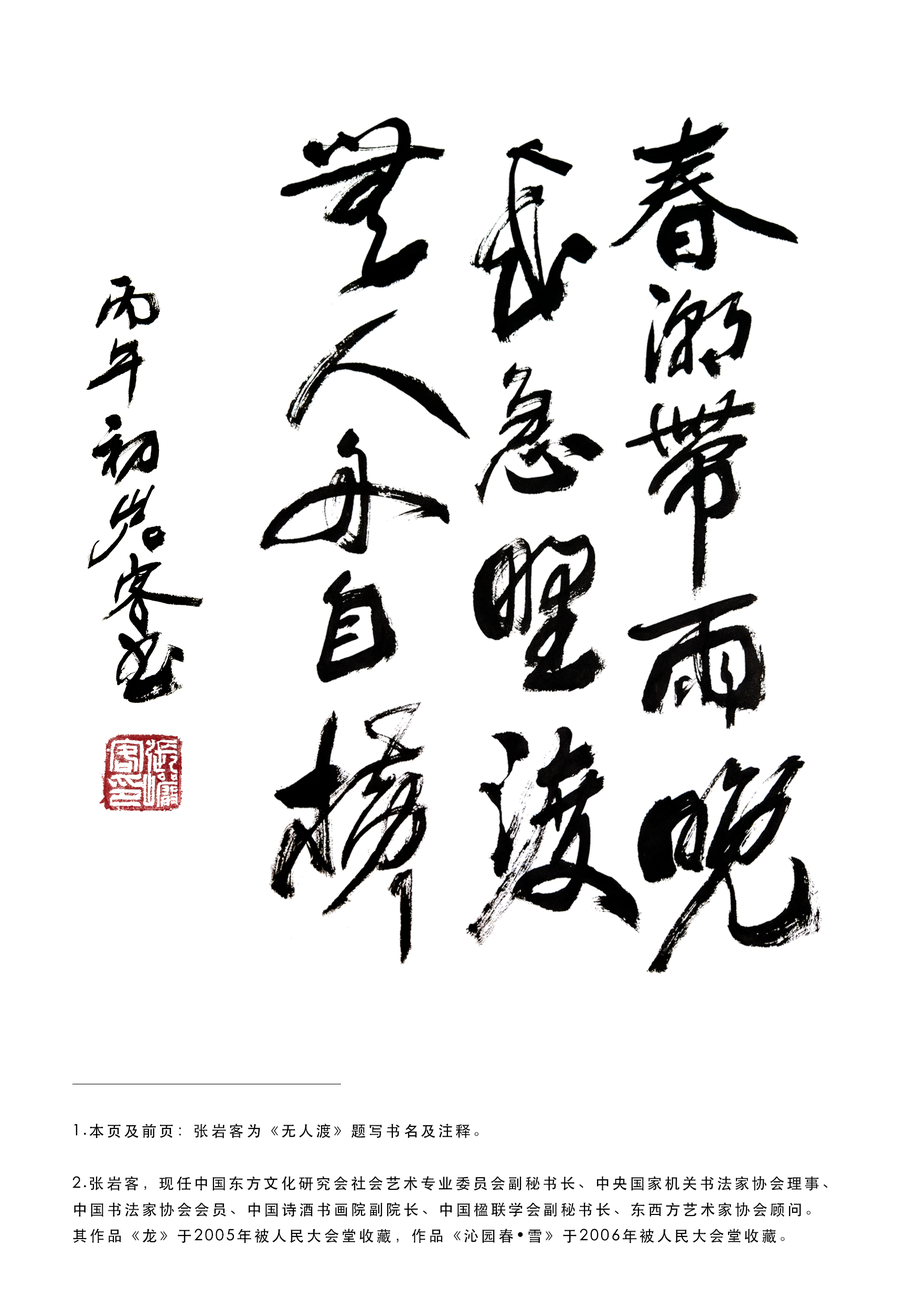
<style>
.page{position:relative;width:917px;height:1301px;background:#ffffff}
.page>*{position:absolute;margin:0}
.t1{font:15.3px/26.2px "STHeitiSC-Medium";letter-spacing:0.14em;color:#000000}
</style>
<div class="page">
<p class="t1" style="left:72px;top:1123px;width:756px;height:120px">1.本页及前页：张岩客为《无人渡》题写书名及注释。<br><br>2.张岩客，现任中国东方文化研究会社会艺术专业委员会副秘书长、中央国家机关书法家协会理事、中国书法家协会会员、中国诗酒书画院副院长、中国楹联学会副秘书长、东西方艺术家协会顾问。<br>其作品《龙》于2005年被人民大会堂收藏，作品《沁园春•雪》于2006年被人民大会堂收藏。</p>
</div>
